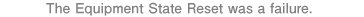
<style>
.page{position:relative;width:364px;height:17px;background:#ffffff}
.page>*{position:absolute;margin:0}
.t1{font:14px "FutoGoB101Pr5-Bold";color:#808080}
</style>
<div class="page">
<p class="t1" style="left:46px;top:2px;width:266px;height:14px">The Equipment State Reset was a failure.</p>
</div>
